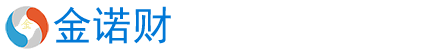
<style>
.page{position:relative;width:443px;height:50px;background:#ffffff}
.page>*{position:absolute;margin:0}
.t1{font:40px "SimHei";color:#0078d7}
.t2{font:12.5px "STKaiti";color:#f0e68c}
</style>
<div class="page">
<p class="t1" style="left:53px;top:6px;width:118px;height:38px">金诺财</p>
<p class="t2" style="left:21px;top:19px;width:12px;height:10px">金</p>
</div>
